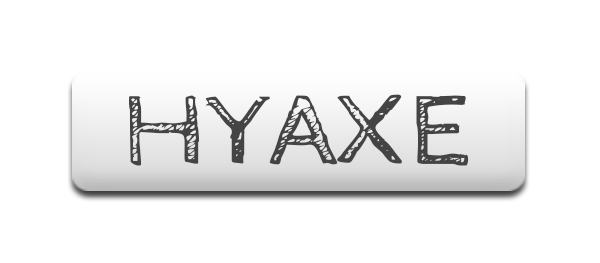
<style>
.page{position:relative;width:600px;height:263px;background:#ffffff}
.page>*{position:absolute;margin:0}
.t1{font:102.2px "CabinSketch-Regular";letter-spacing:0.005em;color:#444444;scale:1.16 1}
</style>
<div class="page">
<p class="t1" style="left:129px;top:94px;width:340px;height:72px">HYAXE</p>
</div>
